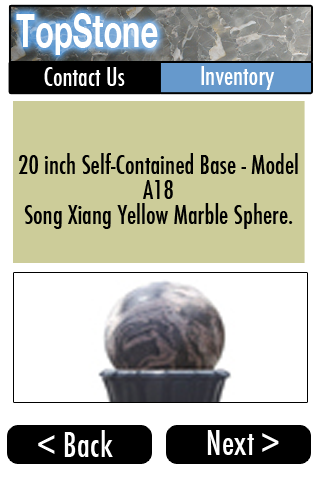
<style>
.page{position:relative;width:320px;height:480px;background:#ffffff}
.page>*{position:absolute;margin:0}
.t1{font:45.8px "HelveticaNeue-Bold";color:#ffffff;scale:0.67 1}
.t2{font:25px "Futura-CondensedMedium";color:#ffffff}
.t3{font:25px/25px "Futura-CondensedMedium";color:#000000}
.t4{font:33.3px "Futura-CondensedMedium";color:#ffffff}
</style>
<div class="page">
<p class="t1" style="left:16px;top:13px;width:142px;height:42px">TopStone</p>
<p class="t2" style="left:44px;top:67px;width:81px;height:19px">Contact Us</p>
<p class="t2" style="left:201px;top:66px;width:74px;height:24px">Inventory</p>
<p class="t3" style="left:18px;top:153px;width:280px;height:76px;text-align:center">20 inch Self-Contained Base - Model A18 <br>Song Xiang Yellow Marble Sphere.</p>
<p class="t4" style="left:38px;top:430px;width:75px;height:27px">&lt; Back</p>
<p class="t4" style="left:207px;top:430px;width:72px;height:25px">Next &gt;</p>
</div>
